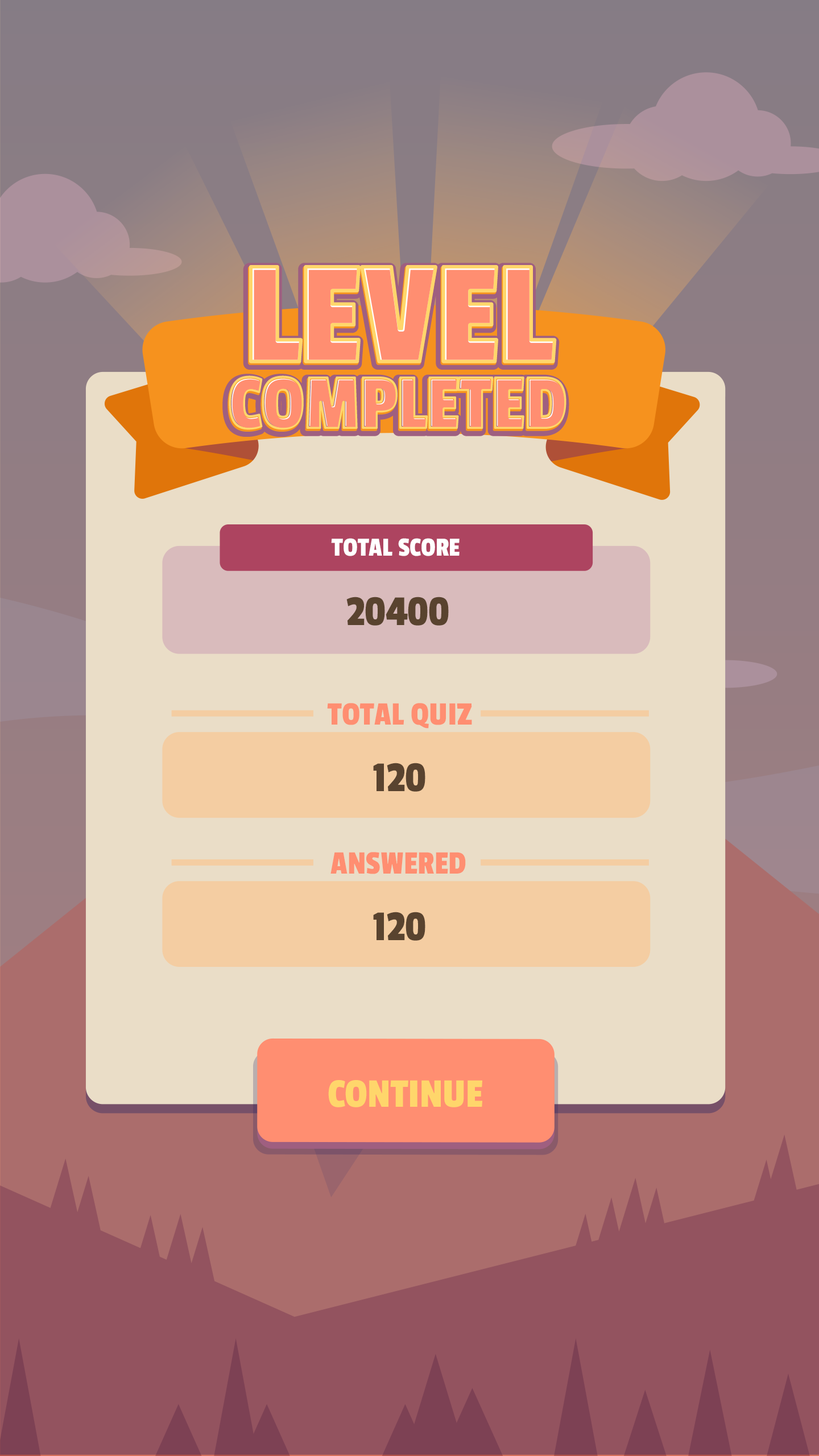
<style>
.page{position:relative;width:819px;height:1456px}
.page>*{position:absolute;margin:0}
.t1{font:27.3px "PassionOne-Regular";color:#ffffff}
.t2{font:44.3px "PassionOne-Regular";color:#59432f}
.t3{font:34.1px "PassionOne-Regular";color:#ff8e71}
.t4{font:42.3px "PassionOne-Regular";color:#ffd66b}
</style>
<div class="page">
<p class="t1" style="left:331px;top:538px;width:129px;height:18px">TOTAL SCORE</p>
<p class="t2" style="left:346px;top:597px;width:103px;height:29px">20400</p>
<p class="t3" style="left:327px;top:703px;width:145px;height:26px">TOTAL QUIZ</p>
<p class="t2" style="left:373px;top:763px;width:52px;height:29px">120</p>
<p class="t3" style="left:330px;top:852px;width:136px;height:22px">ANSWERED</p>
<p class="t2" style="left:373px;top:912px;width:52px;height:29px">120</p>
<p class="t4" style="left:328px;top:1080px;width:154px;height:27px">CONTINUE</p>
</div>
